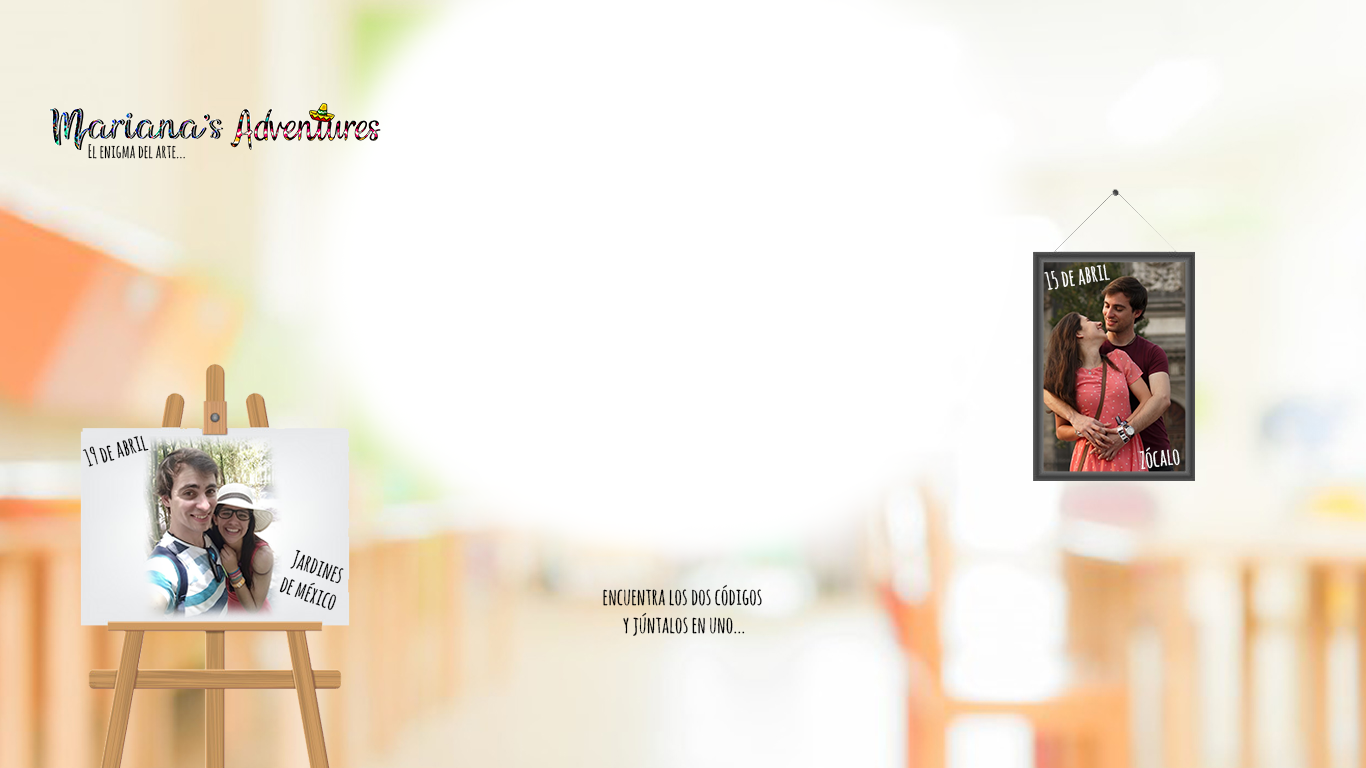
<style>
.page{position:relative;width:1366px;height:768px;background:#ffffff}
.page>*{position:absolute;margin:0}
.t1{font:18.2px "AmaticSC-Bold";color:#000000}
.t2{font:23px "AmaticSC-Bold";color:#fcfcfc}
.t3{font:23px "AmaticSC-Bold";color:#000000}
</style>
<div class="page">
<p class="t1" style="left:88px;top:144px;width:97px;height:15px">El enigma del arte...</p>
<p class="t2" style="left:1044px;top:264px;width:66px;height:26px;rotate:-9deg">15 de abril</p>
<p class="t3" style="left:82px;top:435px;width:67px;height:32px;rotate:-16deg">19 de abril</p>
<p class="t2" style="left:1139px;top:447px;width:41px;height:23px;rotate:-7deg">Zócalo</p>
<p class="t3" style="left:279px;top:549px;width:65px;height:61px;text-align:center;rotate:20deg">Jardines<br>de méxico</p>
<p class="t3" style="left:603px;top:584px;width:159px;height:52px;text-align:center">encuentra los dos códigos <br>y júntalos en uno...</p>
</div>
